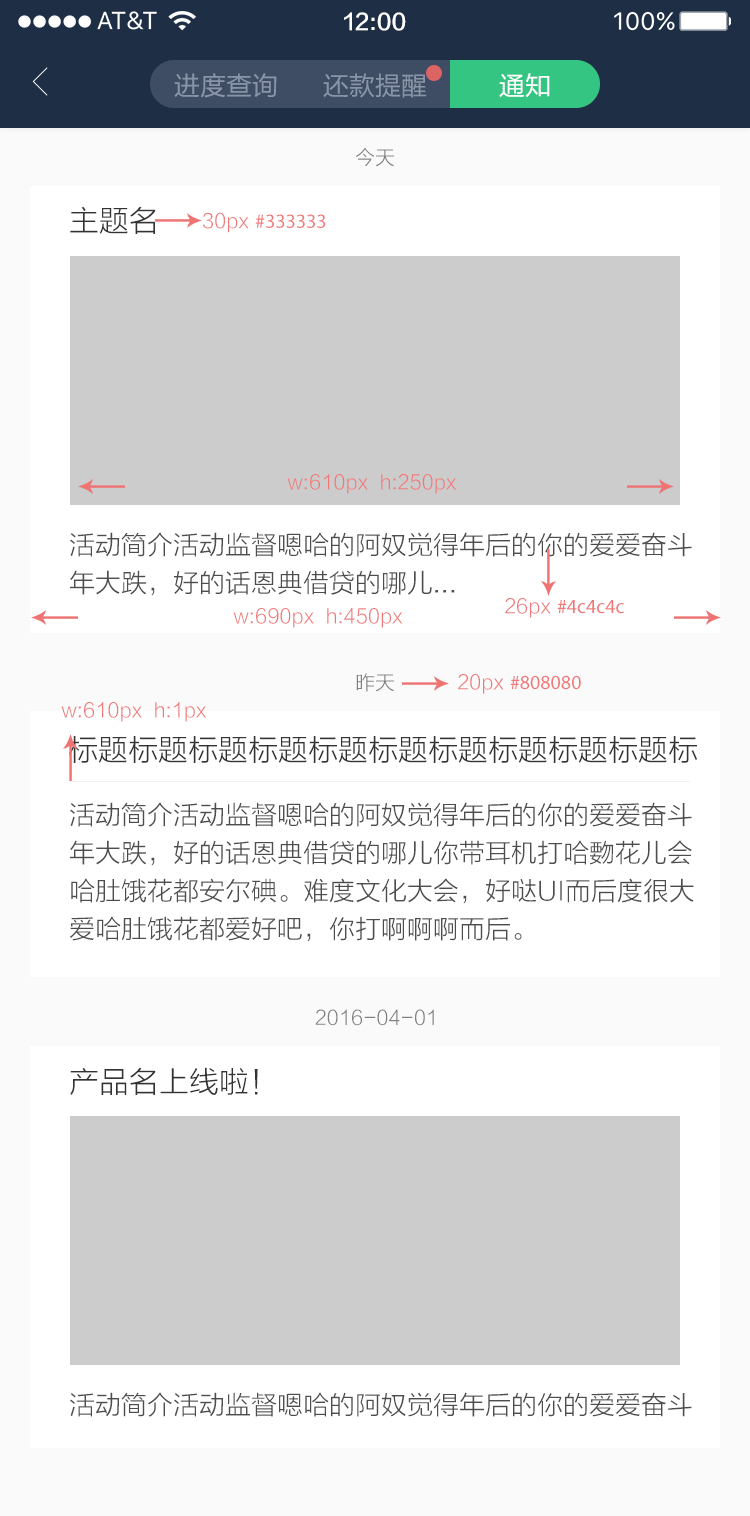
<style>
.page{position:relative;width:750px;height:1516px;background:#ffffff}
.page>*{position:absolute;margin:0}
.t1{font:22px "FZLTZHK--GBK1-0";color:#ffffff}
.t2{font:26px "FZLTHJW--GB1-0";color:#8895a8}
.t3{font:26px "FZLTHJW--GB1-0";color:#ffffff}
.t4{font:20px "FZLTXHK";color:#808080}
.t5{font:30px "FZLTXHK";color:#333333}
.t6{font:20px "MyriadPro-Regular";color:#ef7979}
.t7{font:20px "FZLTXHK";color:#ef7979}
.t8{font:26px/38px "FZLTXHK";color:#4d4d4d}
.t9{font:26px "FZLTXHK";color:#4d4d4d}
</style>
<div class="page">
<p class="t1" style="left:344px;top:12px;width:62px;height:19px">12:00</p>
<p class="t2" style="left:174px;top:73px;width:103px;height:25px">进度查询</p>
<p class="t2" style="left:323px;top:73px;width:104px;height:25px">还款提醒</p>
<p class="t3" style="left:499px;top:73px;width:51px;height:25px">通知</p>
<p class="t4" style="left:356px;top:148px;width:38px;height:19px">今天</p>
<p class="t5" style="left:70px;top:206px;width:86px;height:28px">主题名</p>
<p class="t6" style="left:203px;top:212px;width:123px;height:21px"><span class="t7">30px </span>#333333</p>
<p class="t7" style="left:287px;top:474px;width:169px;height:20px">w:610px  h:250px</p>
<p class="t8" style="left:70px;top:532px;width:622px;height:64px">活动简介活动监督嗯哈的阿奴觉得年后的你的爱爱奋斗<br>年大跌，好的话恩典借贷的哪儿...</p>
<p class="t6" style="left:505px;top:598px;width:119px;height:20px"><span class="t7">26px </span>#4c4c4c</p>
<p class="t7" style="left:233px;top:608px;width:170px;height:20px">w:690px  h:450px</p>
<p class="t4" style="left:356px;top:673px;width:38px;height:19px">昨天</p>
<p class="t6" style="left:458px;top:674px;width:123px;height:20px"><span class="t7">20px </span>#808080</p>
<p class="t7" style="left:61px;top:702px;width:145px;height:20px">w:610px  h:1px</p>
<p class="t5" style="left:69px;top:736px;width:628px;height:27px">标题标题标题标题标题标题标题标题标题标题标</p>
<p class="t8" style="left:69px;top:802px;width:625px;height:140px">活动简介活动监督嗯哈的阿奴觉得年后的你的爱爱奋斗<br>年大跌，好的话恩典借贷的哪儿你带耳机打哈覅花儿会<br>哈肚饿花都安尔碘。难度文化大会，好哒UI而后度很大<br>爱哈肚饿花都爱好吧，你打啊啊啊而后。</p>
<p class="t4" style="left:315px;top:1009px;width:119px;height:17px">2016-04-01</p>
<p class="t5" style="left:70px;top:1067px;width:188px;height:28px">产品名上线啦！</p>
<p class="t9" style="left:70px;top:1392px;width:622px;height:25px">活动简介活动监督嗯哈的阿奴觉得年后的你的爱爱奋斗</p>
</div>
